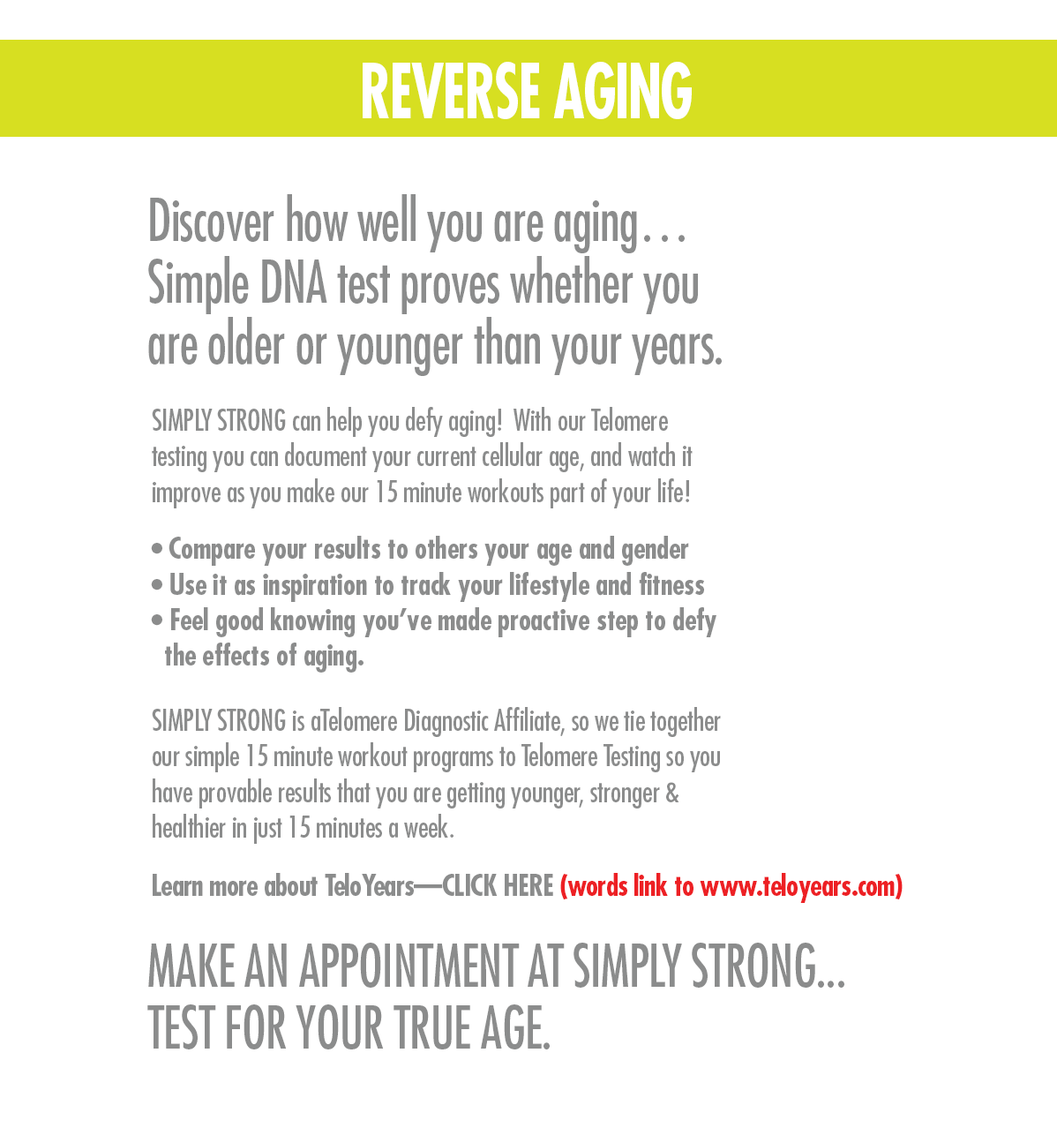
<style>
.page{position:relative;width:1057px;height:1128px;background:#ffffff}
.page>*{position:absolute;margin:0}
.t1{font:73.5px "Futura-CondensedBold";letter-spacing:-0.025em;color:#ffffff;scale:0.8 1}
.t2{font:56.9px/61.3px "Futura-Condensed";letter-spacing:-0.01em;color:#8b8c8c;scale:0.9 1}
.t3{font:28.4px/35.5px "Futura-Condensed";letter-spacing:-0.01em;color:#8b8c8c}
.t4{font:28.4px/35.5px "Futura-CondensedBold";letter-spacing:-0.01em;color:#8b8c8c}
.t5{font:28.4px/35.5px "Futura-CondensedBold";letter-spacing:-0.025em;color:#8b8c8c}
.t6{font:28.4px "Futura-CondensedBold";letter-spacing:-0.025em;color:#8b8c8c}
.t7{font:28.4px "Futura-CondensedBold";letter-spacing:-0.025em;color:#ed2024}
</style>
<div class="page">
<p class="t1" style="left:363px;top:62px;width:329px;height:57px">REVERSE AGING</p>
<p class="t2" style="left:148px;top:194px;width:574px;height:182px">Discover how well you are aging…<br>Simple DNA test proves whether you<br>are older or younger than your years.</p>
<p class="t3" style="left:152px;top:407px;width:541px;height:101px">SIMPLY STRONG can help you defy aging!  With our Telomere<br>testing you can document your current cellular age, and watch it<br>improve as you make our 15 minute workouts part of your life!</p>
<p class="t4" style="left:151px;top:536px;width:566px;height:136px"><span class="t5">•</span> Compare your results to others your age and gender<br>• Use it as inspiration to track your lifestyle and fitness<br>• Feel good knowing you’ve made proactive step to defy<br>  the effects of aging.</p>
<p class="t3" style="left:152px;top:707px;width:569px;height:137px">SIMPLY STRONG is aTelomere Diagnostic Affiliate, so we tie together<br>our simple 15 minute workout programs to Telomere Testing so you<br>have provable results that you are getting younger, stronger &amp;<br>healthier in just 15 minutes a week.</p>
<p class="t6" style="left:153px;top:873px;width:750px;height:30px">Learn more about TeloYears—CLICK HERE <span class="t7">(words link to www.teloyears.com)</span></p>
<p class="t2" style="left:147px;top:943px;width:698px;height:106px">MAKE AN APPOINTMENT AT SIMPLY STRONG...<br>TEST FOR YOUR TRUE AGE.</p>
</div>
